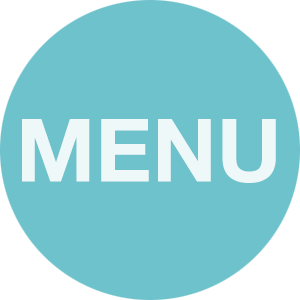
<style>
.page{position:relative;width:300px;height:300px;background:#6ec2cb}
.page>*{position:absolute;margin:0}
.t1{font:87.5px "HelveticaNeue-Bold";color:#eff8f9}
</style>
<div class="page">
<p class="t1" style="left:22px;top:119px;width:254px;height:64px">MENU</p>
</div>
